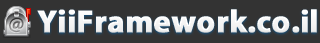
<style>
.page{position:relative;width:320px;height:43px;background:#333333}
.page>*{position:absolute;margin:0}
.t1{font:32px "MyriadPro-Bold";color:#ffffff;font-weight:bold}
</style>
<div class="page">
<p class="t1" style="left:37px;top:9px;width:280px;height:24px">YiiFramework.co.il</p>
</div>
